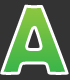
<style>
.page{position:relative;width:70px;height:80px;background:#333333}
.page>*{position:absolute;margin:0}
.t1{font:100px "BerlinSansFBDemi-Bold";letter-spacing:0.2em}
</style>
<div class="page">
<p class="t1" style="left:0px;top:4px;width:69px;height:71px">A</p>
</div>
